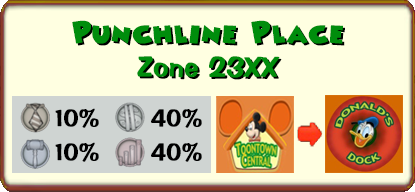
<style>
.page{position:relative;width:415px;height:192px;background:#ffffe1}
.page>*{position:absolute;margin:0}
.t1{font:28px "Minnie";color:#008d0c;font-weight:bold}
.t2{font:28px "Minnie";font-weight:bold}
.t3{font:28px "ImpressBT-Regular";color:#008d0c;font-weight:bold}
.t4{font:28px "ImpressBT-Regular";font-weight:bold}
.t5{font:23.6px "ImpressBT-Regular";color:#000000;font-weight:bold}
</style>
<div class="page">
<p class="t1" style="left:72px;top:20px;width:271px;height:24px">Punchline Place</p>
<p class="t2" style="left:74px;top:22px;width:271px;height:24px">Punchline Place</p>
<p class="t3" style="left:137px;top:56px;width:143px;height:22px">Zone 23XX</p>
<p class="t4" style="left:139px;top:58px;width:143px;height:22px">Zone 23XX</p>
<p class="t5" style="left:55px;top:108px;width:44px;height:20px">10%</p>
<p class="t5" style="left:151px;top:108px;width:51px;height:20px">40%</p>
<p class="t5" style="left:55px;top:142px;width:44px;height:20px">10%</p>
<p class="t5" style="left:151px;top:142px;width:51px;height:20px">40%</p>
</div>
